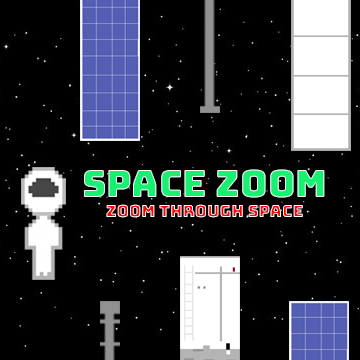
<style>
.page{position:relative;width:360px;height:360px;background:#000000}
.page>*{position:absolute;margin:0}
.t1{font:16.7px "Bungee-Regular";color:#ff0000}
.t2{font:37.5px "Bungee-Regular";color:#18f071}
</style>
<div class="page">
<p class="t1" style="left:84px;top:169px;width:241px;height:49px;text-align:center"><span class="t2"><br>Space zoom<br></span>zoom through space</p>
</div>
